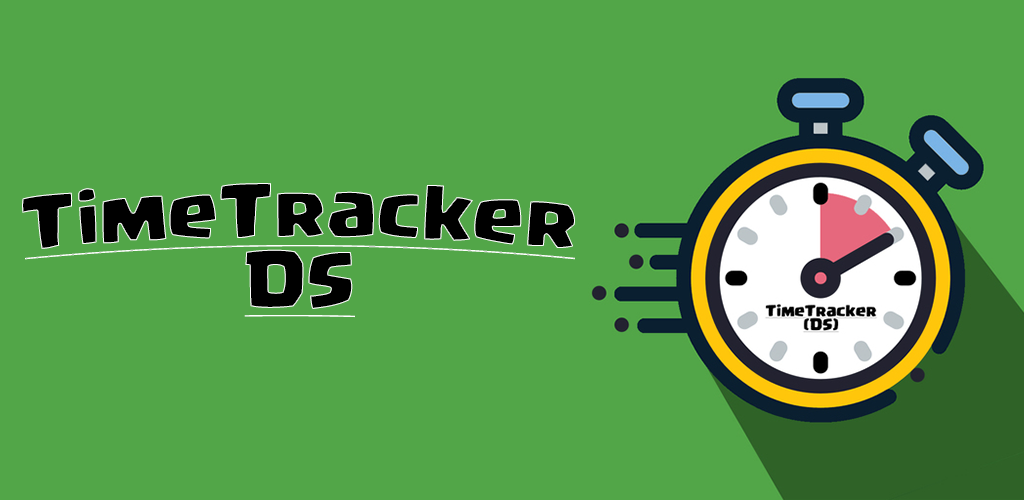
<style>
.page{position:relative;width:1024px;height:500px;background:#52a648}
.page>*{position:absolute;margin:0}
.t1{font:58.3px "Supercell-Magic";color:#000000;text-decoration:underline}
</style>
<div class="page">
<p class="t1" style="left:22px;top:183px;width:553px;height:135px;text-align:center">TimeTracker<br>DS</p>
</div>
